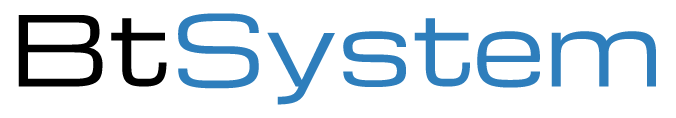
<style>
.page{position:relative;width:676px;height:118px;background:#ffffff}
.page>*{position:absolute;margin:0}
.t1{font:95.2px "Michroma";color:#2e7ebc}
.t2{font:95.2px "Michroma";color:#000000}
</style>
<div class="page">
<p class="t1" style="left:18px;top:13px;width:638px;height:92px"><span class="t2">Bt</span>System</p>
</div>
